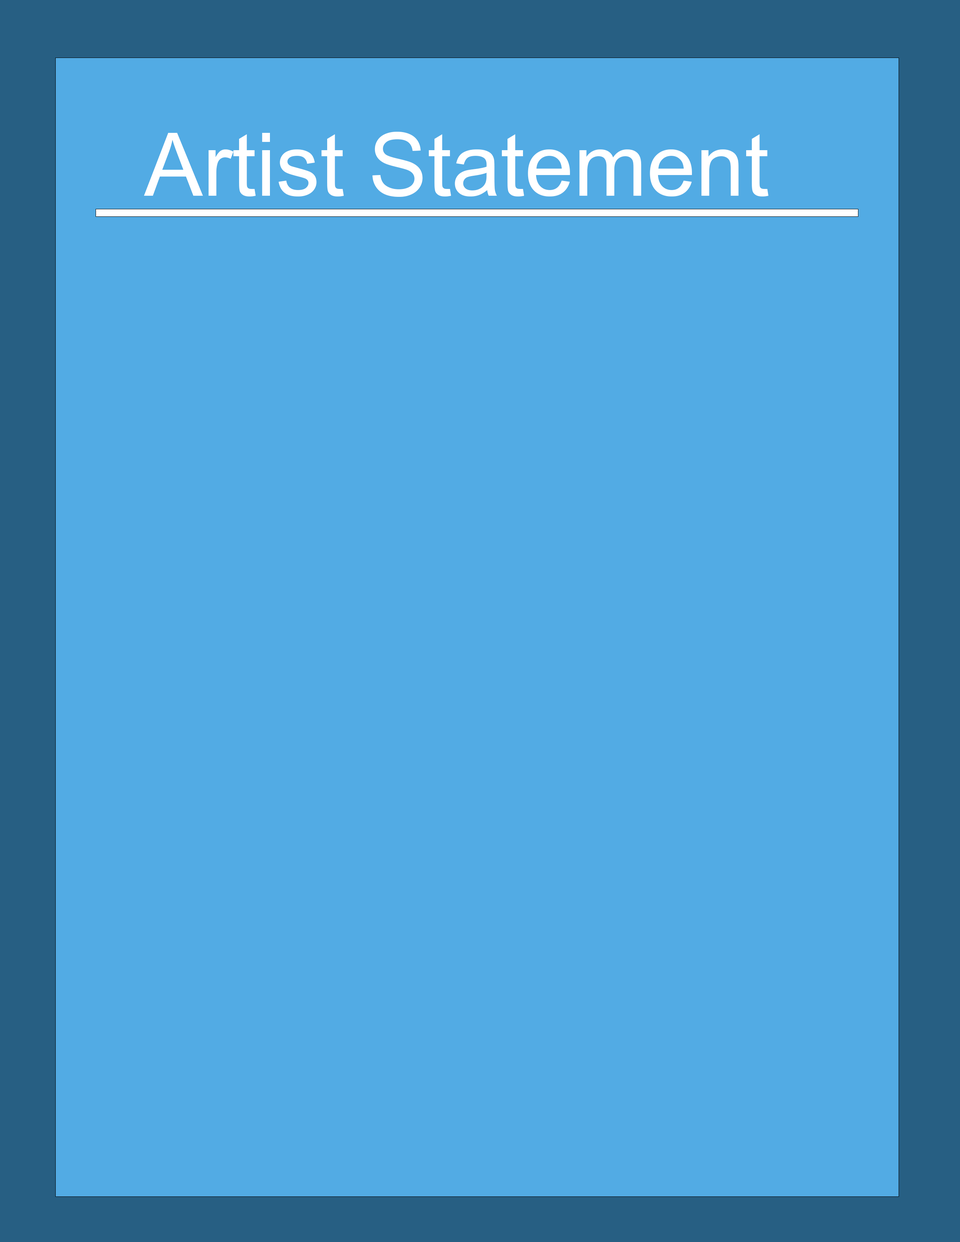
<style>
.page{position:relative;width:960px;height:1242px;background:#52abe4}
.page>*{position:absolute;margin:0}
.t1{font:87.8px "ArialMT";color:#ffffff}
</style>
<div class="page">
<p class="t1" style="left:144px;top:132px;width:625px;height:65px">Artist Statement</p>
</div>
